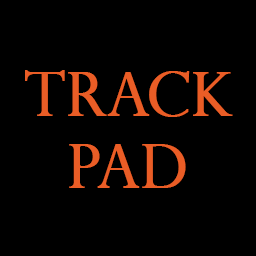
<style>
.page{position:relative;width:256px;height:256px;background:#000000}
.page>*{position:absolute;margin:0}
.t1{font:60px "PerpetuaTitlingMT-Light";color:#ea5d26;font-weight:bold}
</style>
<div class="page">
<p class="t1" style="left:25px;top:70px;width:208px;height:118px">Track<br>  PAD</p>
</div>
